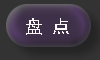
<style>
.page{position:relative;width:100px;height:60px;background:#333333}
.page>*{position:absolute;margin:0}
.t1{font:18px "SimHei";color:#fbf7f7}
</style>
<div class="page">
<p class="t1" style="left:26px;top:18px;width:43px;height:17px">盘 点ding定</p>
</div>
